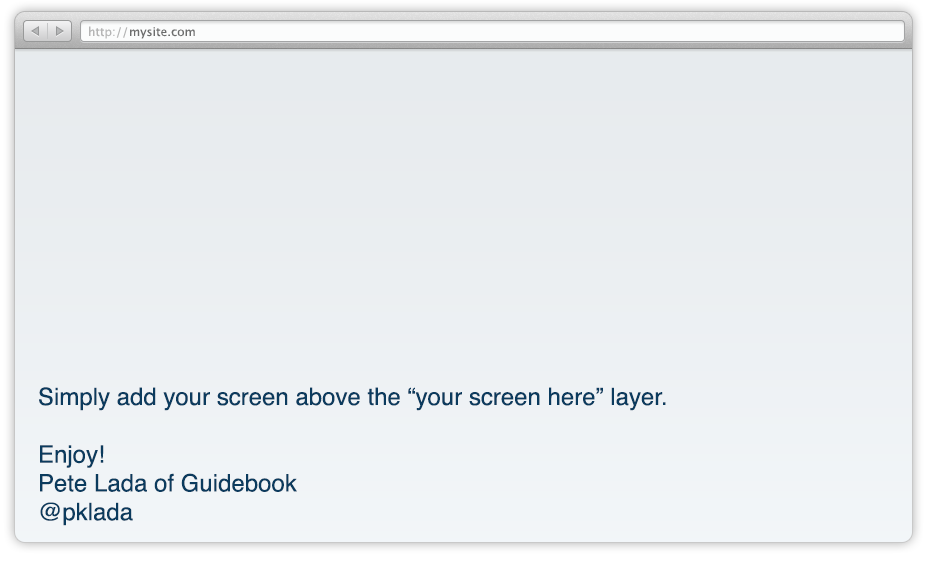
<style>
.page{position:relative;width:927px;height:562px}
.page>*{position:absolute;margin:0}
.t1{font:12px "LucidaGrande";color:#b5b5b5}
.t2{font:12px "LucidaGrande";color:#6c6d6d}
.t3{font:24px "Helvetica";color:#0b3b5e}
</style>
<div class="page">
<p class="t1" style="left:89px;top:26px;width:39px;height:13px">http://</p>
<p class="t2" style="left:130px;top:27px;width:65px;height:12px">mysite.com</p>
<p class="t3" style="left:39px;top:387px;width:627px;height:139px">Simply add your screen above the “your screen here” layer.<br><br>Enjoy!<br>Pete Lada of Guidebook<br>@pklada</p>
</div>
